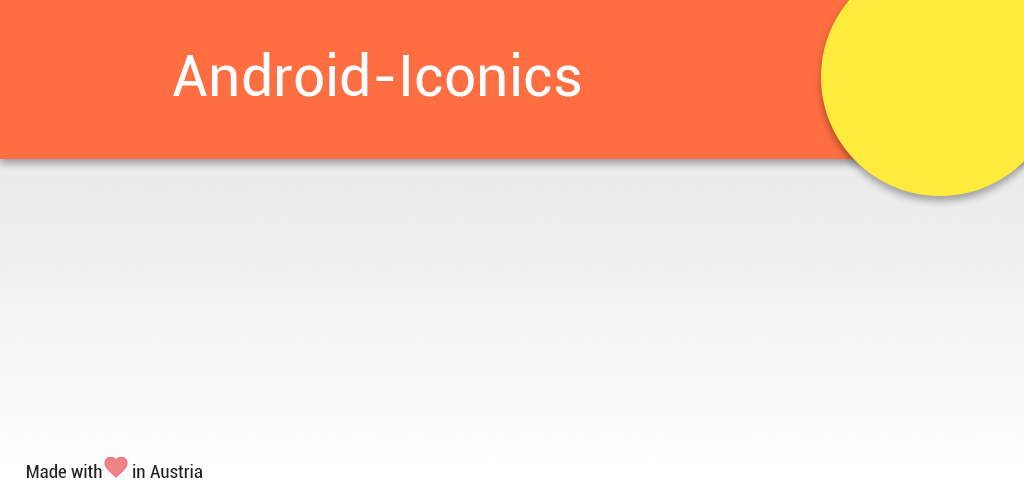
<style>
.page{position:relative;width:1024px;height:500px;background:#ff6e40}
.page>*{position:absolute;margin:0}
.t1{font:57.1px "Roboto-Regular";color:#ffffff}
.t2{font:19.1px "Roboto-Condensed";color:#212121}
</style>
<div class="page">
<p class="t1" style="left:173px;top:52px;width:407px;height:45px">Android-Iconics</p>
<p class="t2" style="left:26px;top:464px;width:177px;height:14px">Made with       in Austria</p>
</div>
